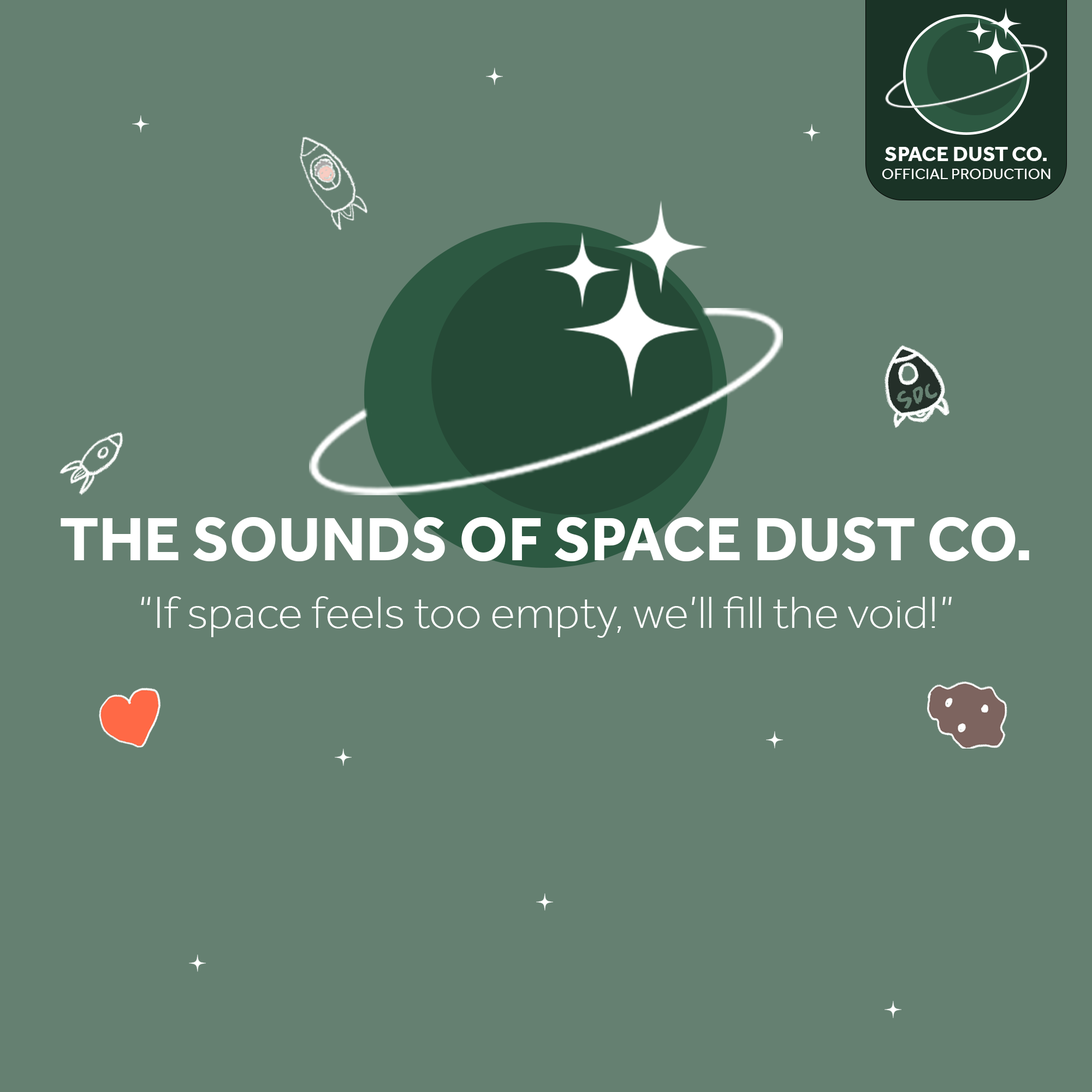
<style>
.page{position:relative;width:1092px;height:1092px;background:#658071}
.page>*{position:absolute;margin:0}
.t1{font:21.5px "Effra-Bold";color:#ffffff}
.t2{font:15.9px "Effra-Regular";color:#ffffff}
.t3{font:63px "Effra-Bold";color:#ffffff}
.t4{font:46.7px "Effra-Light";color:#ffffff}
</style>
<div class="page">
<p class="t1" style="left:885px;top:147px;width:162px;height:14px">SPACE DUST CO.</p>
<p class="t2" style="left:882px;top:169px;width:168px;height:10px">OFFICIAL PRODUCTION</p>
<p class="t3" style="left:61px;top:517px;width:968px;height:44px">THE SOUNDS OF SPACE DUST CO.</p>
<p class="t4" style="left:141px;top:596px;width:811px;height:42px">“If space feels too empty, we’ll fill the void!”</p>
</div>
